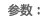
<style>
.page{position:relative;width:46px;height:20px;background:#ffffff}
.page>*{position:absolute;margin:0}
.t1{font:12px "MicrosoftYaHei";color:#5d5d5d;font-weight:bold}
</style>
<div class="page">
<p class="t1" style="left:8px;top:3px;width:32px;height:14px">参数：</p>
</div>
